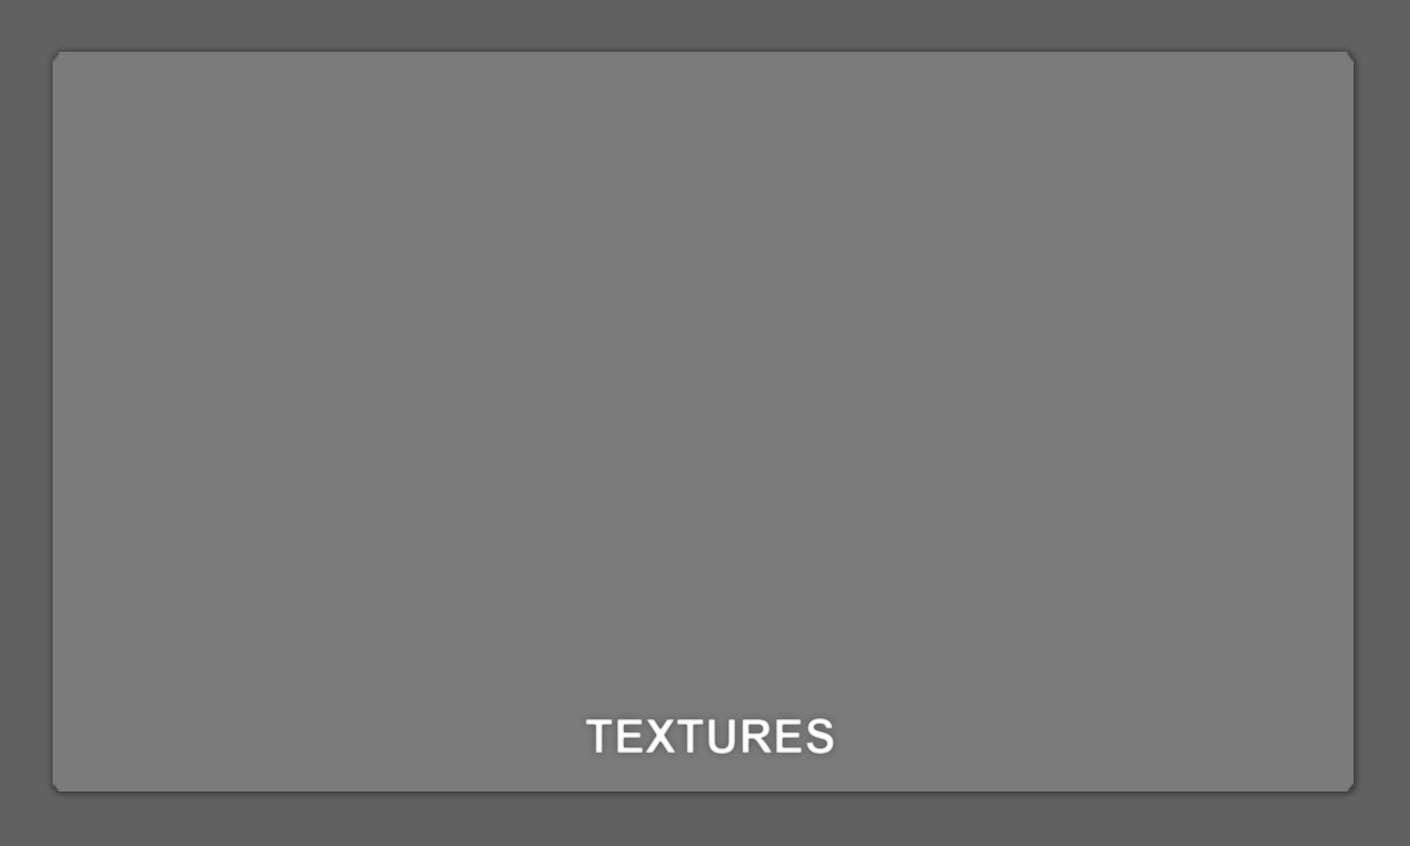
<style>
.page{position:relative;width:1410px;height:846px;background:#7b7b7b}
.page>*{position:absolute;margin:0}
.t1{font:47px "Arial-BoldMT";color:#ffffff}
</style>
<div class="page">
<p class="t1" style="left:586px;top:718px;width:248px;height:36px">TEXTURES</p>
</div>
